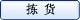
<style>
.page{position:relative;width:80px;height:20px}
.page>*{position:absolute;margin:0}
.t1{font:12px "SimSun";color:#000000}
</style>
<div class="page">
<p class="t1" style="left:26px;top:3px;width:29px;height:12px">拣 货</p>
</div>
